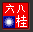
<style>
.page{position:relative;width:33px;height:32px;background:#f20000}
.page>*{position:absolute;margin:0}
.t1{font:10.4px "SimSun";color:#ffffff}
.t2{font:11.7px "SimSun";color:#ffffff}
</style>
<div class="page">
<p class="t1" style="left:5px;top:4px;width:20px;height:9px">六八</p>
<p class="t2" style="left:16px;top:15px;width:11px;height:12px">桂</p>
</div>
